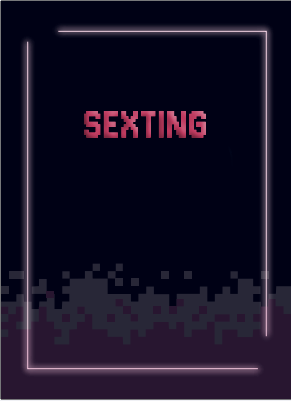
<style>
.page{position:relative;width:291px;height:401px;background:#000115}
.page>*{position:absolute;margin:0}
.t1{font:50px "Jersey10-Regular";letter-spacing:0.025em;scale:0.87 1}
</style>
<div class="page">
<p class="t1" style="left:83px;top:110px;width:123px;height:28px">SEXTING</p>
</div>
